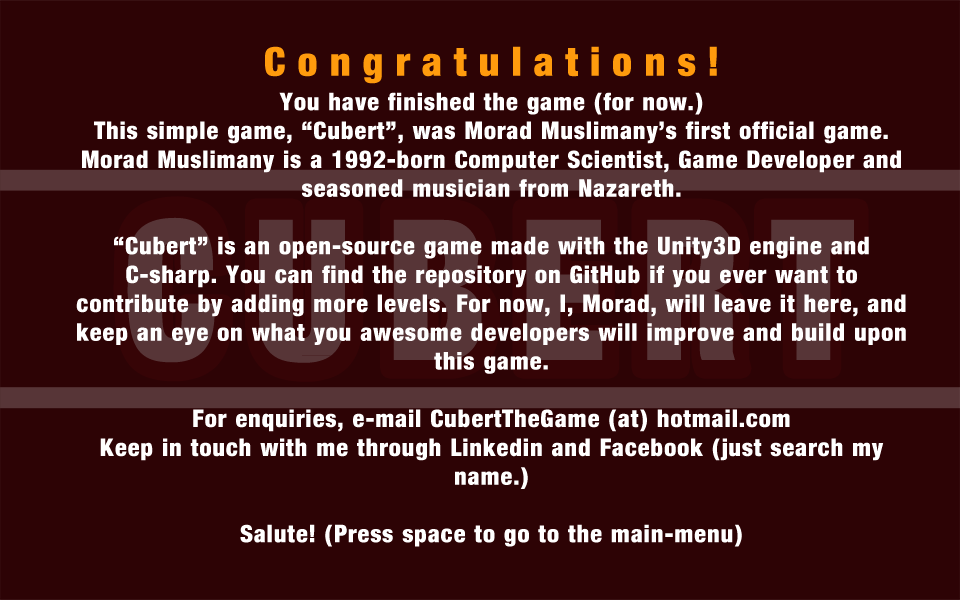
<style>
.page{position:relative;width:960px;height:600px;background:#2d0305}
.page>*{position:absolute;margin:0}
.t1{font:40px "Harvest";letter-spacing:0.305em;color:#ff9b0d}
.t2{font:24px "Harvest";letter-spacing:0.045em;color:#ffffff}
</style>
<div class="page">
<p class="t1" style="left:265px;top:46px;width:452px;height:38px">Congratulations!</p>
<p class="t2" style="left:76px;top:92px;width:830px;height:455px;text-align:center">You have finished the game (for now.)<br>This simple game, “Cubert”, was Morad Muslimany’s first official game.<br>Morad Muslimany is a 1992-born Computer Scientist, Game Developer and seasoned musician from Nazareth.<br><br>“Cubert” is an open-source game made with the Unity3D engine and C-sharp. You can find the repository on GitHub if you ever want to contribute by adding more levels. For now, I, Morad, will leave it here, and keep an eye on what you awesome developers will improve and build upon this game.<br><br>For enquiries, e-mail CubertTheGame (at) hotmail.com<br>Keep in touch with me through Linkedin and Facebook (just search my name.)<br><br>Salute! (Press space to go to the main-menu)</p>
</div>
